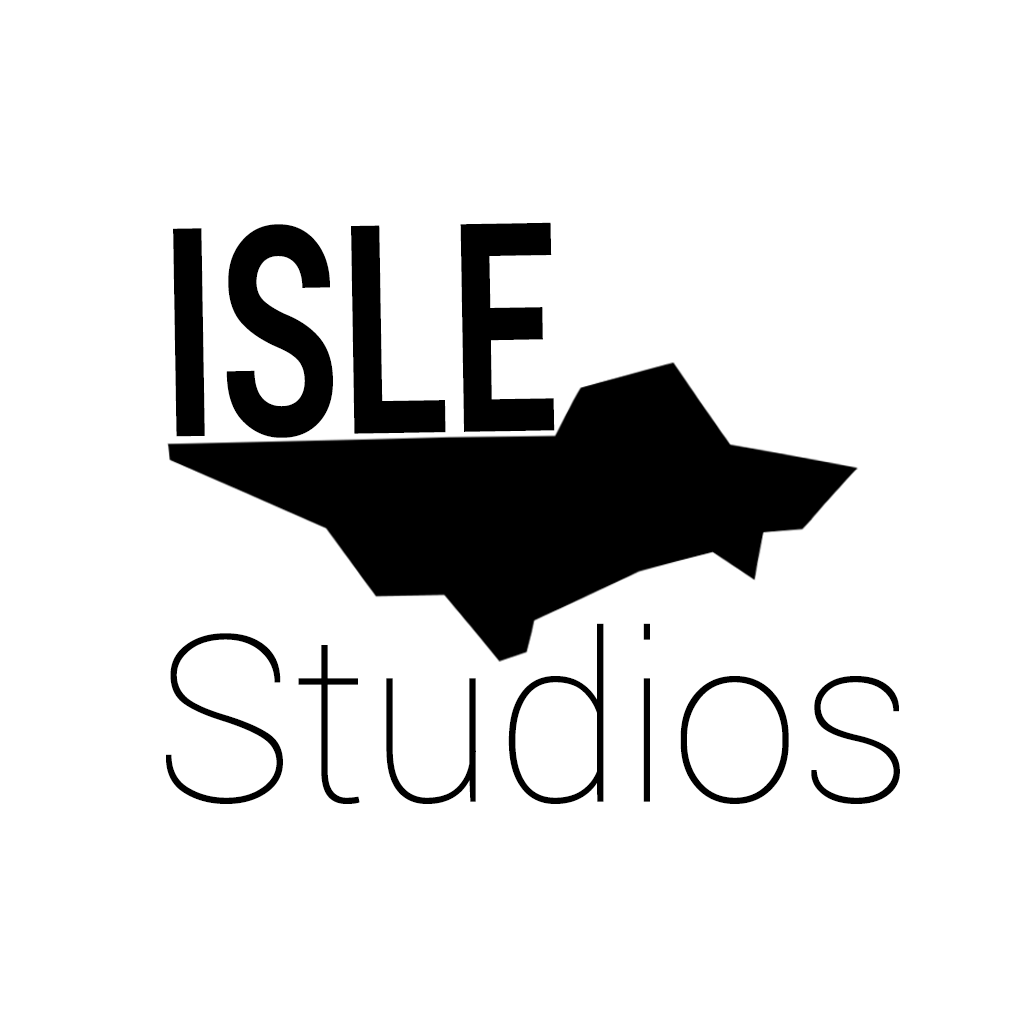
<style>
.page{position:relative;width:1024px;height:1024px;background:#ffffff}
.page>*{position:absolute;margin:0}
.t1{font:291.7px "Roboto-Bold";color:#000000;scale:0.68 1}
.t2{font:233.3px "Roboto-Thin";color:#000000}
</style>
<div class="page">
<p class="t1" style="left:173px;top:222px;width:382px;height:216px;rotate:-1deg">ISLE</p>
<p class="t2" style="left:166px;top:623px;width:734px;height:181px">Studios</p>
</div>
